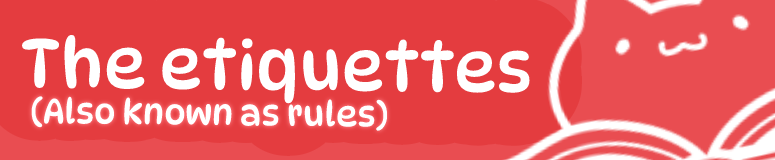
<style>
.page{position:relative;width:775px;height:160px;background:#e43c3f}
.page>*{position:absolute;margin:0}
.t1{font:67px "DynaPuff-Regular";color:#ffffff}
.t2{font:34px "DynaPuff-Regular";color:#ffffff}
</style>
<div class="page">
<p class="t1" style="left:22px;top:35px;width:508px;height:69px;rotate:1deg">The etiquettes</p>
<p class="t2" style="left:31px;top:96px;width:356px;height:35px;rotate:1deg">(Also known as rules)</p>
</div>
